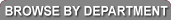
<style>
.page{position:relative;width:171px;height:20px;background:#858585}
.page>*{position:absolute;margin:0}
.t1{font:13.3px "Arial-BoldMT";color:#ffffff;scale:0.92 1}
</style>
<div class="page">
<p class="t1" style="left:5px;top:5px;width:163px;height:11px">BROWSE BY DEPARTMENT</p>
</div>
